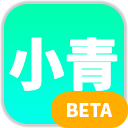
<style>
.page{position:relative;width:128px;height:128px}
.page>*{position:absolute;margin:0}
.t1{font:55.9px "SourceHanSansSC-Heavy";color:#ffffff}
.t2{font:18px "SourceHanSansSC-Heavy";color:#ffffff}
</style>
<div class="page">
<p class="t1" style="left:9px;top:37px;width:108px;height:54px">小青</p>
<p class="t2" style="left:67px;top:103px;width:46px;height:14px">BETA</p>
</div>
